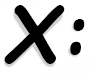
<style>
.page{position:relative;width:91px;height:74px;background:#ffffff}
.page>*{position:absolute;margin:0}
.t1{font:75px "ComicSansMS-BoldItalic";color:#000000}
</style>
<div class="page">
<p class="t1" style="left:4px;top:5px;width:81px;height:59px">X:</p>
</div>
